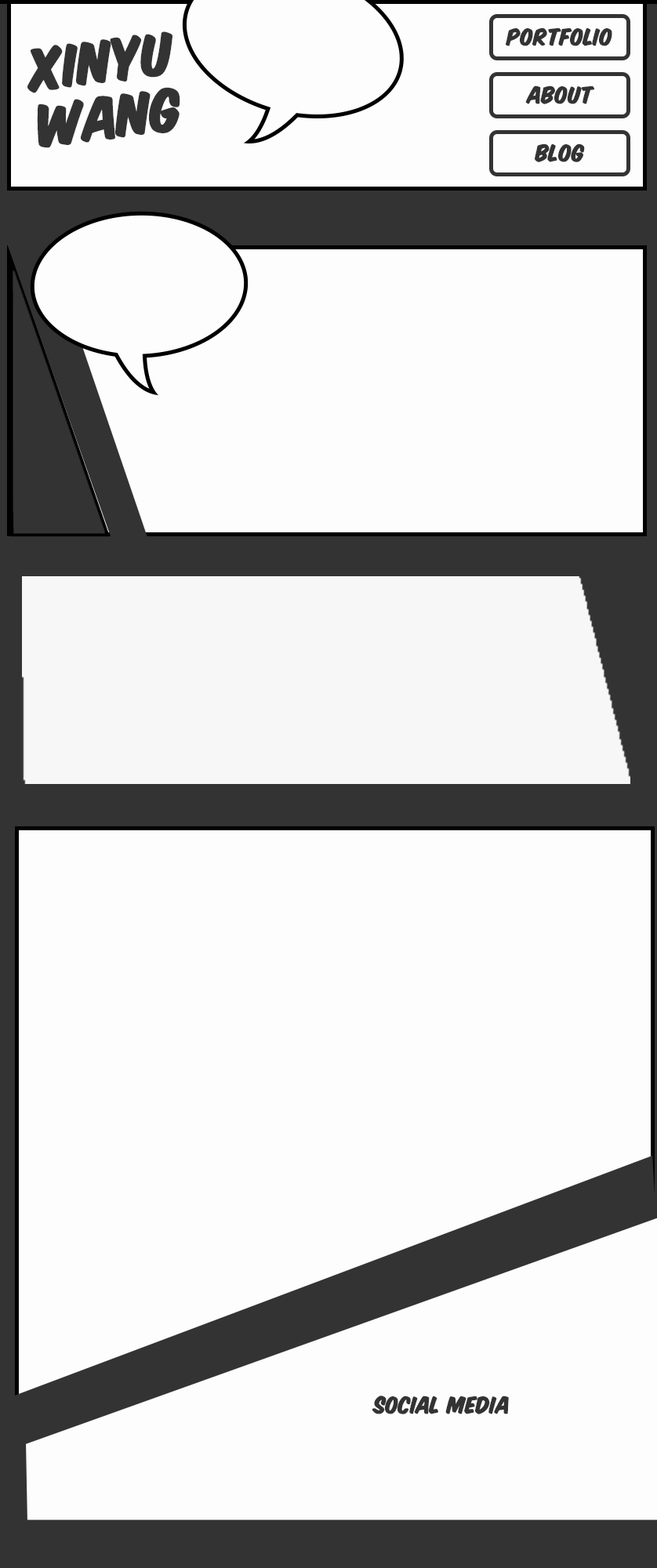
<style>
.page{position:relative;width:657px;height:1568px;background:#fdfdfd}
.page>*{position:absolute;margin:0}
.t1{font:18.8px "KomikaTitle-Paint";color:#333333}
.t2{font:47px "KomikaTitle-Paint";color:#333333}
</style>
<div class="page">
<p class="t1" style="left:506px;top:27px;width:106px;height:19px">portfolio</p>
<p class="t2" style="left:27px;top:31px;width:153px;height:117px;rotate:-7deg">xinyu<br>wang</p>
<p class="t1" style="left:525px;top:85px;width:69px;height:19px">about</p>
<p class="t1" style="left:535px;top:143px;width:50px;height:19px">blog</p>
<p class="t1" style="left:372px;top:1396px;width:137px;height:18px">social media</p>
</div>
